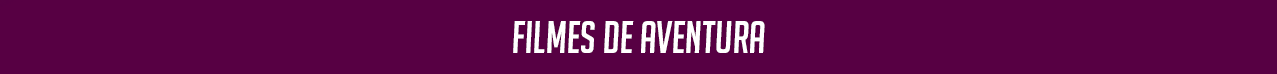
<style>
.page{position:relative;width:1277px;height:74px;background:#570043}
.page>*{position:absolute;margin:0}
.t1{font:44.6px "BigNoodleTitling-Oblique";color:#ffffff}
</style>
<div class="page">
<p class="t1" style="left:513px;top:21px;width:252px;height:32px">FILMES DE AVENTURA</p>
</div>
